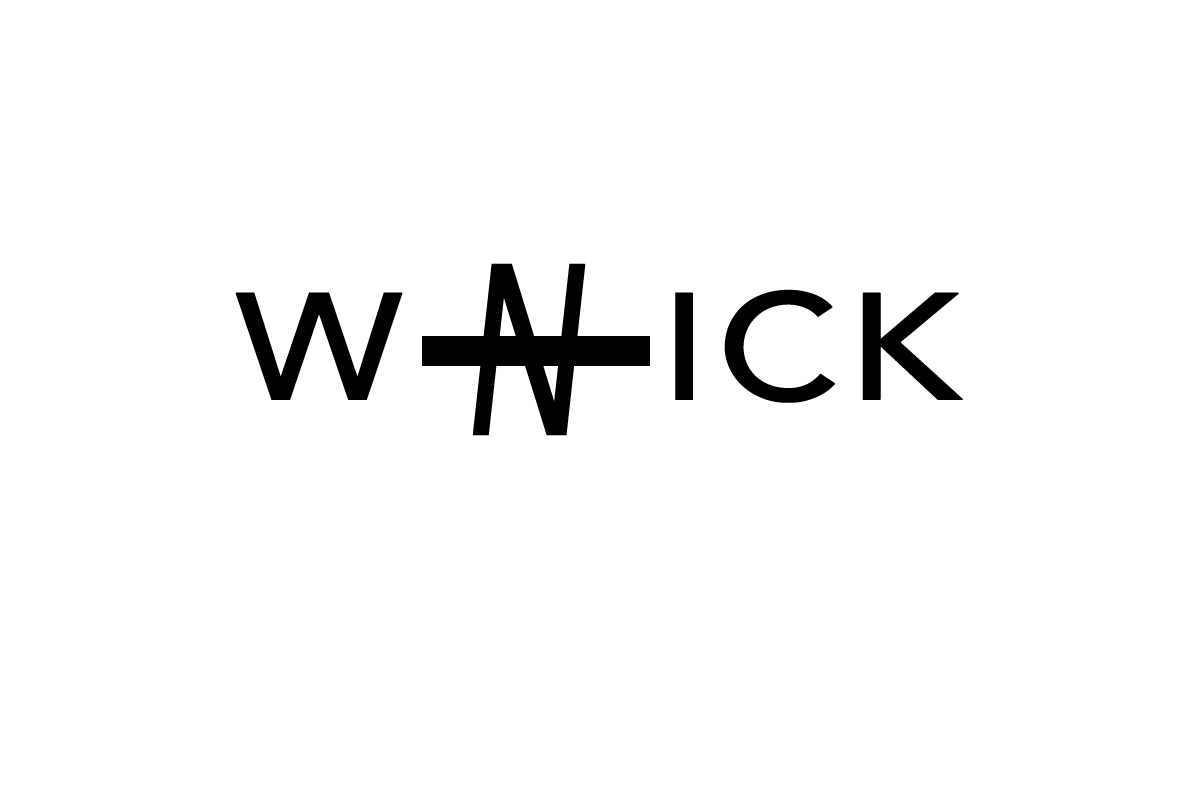
<style>
.page{position:relative;width:1200px;height:800px;background:#ffffff}
.page>*{position:absolute;margin:0}
.t1{font:240px "Avenir-Medium";letter-spacing:0.025em;color:#000000;text-transform:uppercase;font-weight:bold;font-style:italic;scale:0.62 1}
.t2{font:150px "Avenir-Medium";letter-spacing:0.025em;color:#000000;text-transform:uppercase;font-weight:bold;scale:1.15 1}
</style>
<div class="page">
<p class="t1" style="left:472px;top:263px;width:114px;height:173px">n</p>
<p class="t2" style="left:235px;top:289px;width:728px;height:114px">W     ick</p>
</div>
